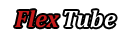
<style>
.page{position:relative;width:133px;height:40px;background:#ffffff}
.page>*{position:absolute;margin:0}
.t1{font:24px "Cambria-BoldItalic";color:#c71a1a}
.t2{font:24px "Cambria-BoldItalic";color:#ffffff}
</style>
<div class="page">
<p class="t1" style="left:15px;top:10px;width:44px;height:18px">Flex</p>
<p class="t2" style="left:64px;top:10px;width:52px;height:18px">Tube</p>
</div>
